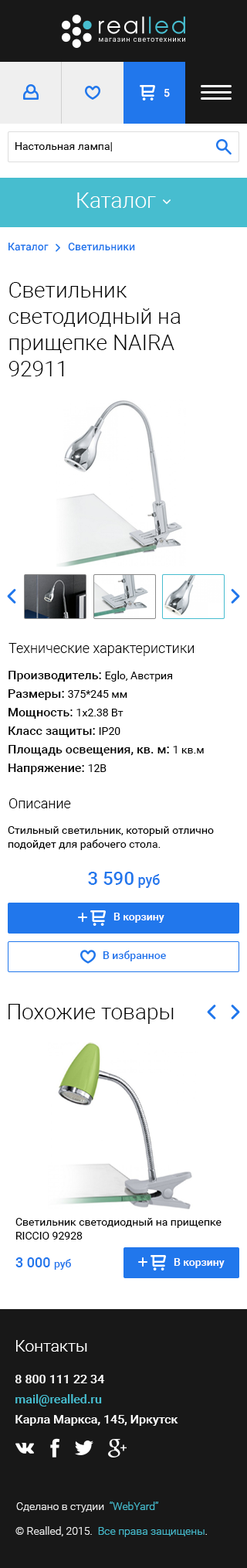
<style>
.page{position:relative;width:247px;height:1568px;background:#ffffff}
.page>*{position:absolute;margin:0}
.t1{font:10.8px "Roboto-Medium";color:#ffffff}
.t2{font:10.8px "Roboto-Regular";color:#000000}
.t3{font:21.6px "Roboto-Light";color:#ffffff}
.t4{font:10.8px "Roboto-Medium";color:#2177ec}
.t5{font:21.6px/26.3px "Roboto-Light";color:#000000}
.t6{font:13.9px "Roboto-Light";color:#000000}
.t7{font:12.4px/18.5px "Roboto-Medium";color:#000000}
.t8{font:10.8px/18.5px "Roboto-Regular";color:#000000}
.t9{font:10.8px/13.9px "Roboto-Regular";color:#000000}
.t10{font:18.6px "Roboto-Medium";color:#2177ec}
.t11{font:14px "Roboto-Medium";color:#2177ec}
.t12{font:21.6px "Roboto-Light";color:#000000}
.t13{font:10.8px/13.9px "Roboto-Regular";color:#010101}
.t14{font:13.9px "Roboto-Medium";color:#2177ec}
.t15{font:16.2px "Roboto-Light";color:#ffffff}
.t16{font:12.4px/20.1px "Roboto-Medium";color:#ffffff}
.t17{font:12.4px/20.1px "Roboto-Medium";color:#47bdcf}
.t18{font:10.8px "Roboto-Light";color:#efefef}
.t19{font:10.8px "Roboto-Light";color:#47bdcf}
</style>
<div class="page">
<p class="t1" style="left:165px;top:89px;width:5px;height:8px">5</p>
<p class="t2" style="left:15px;top:142px;width:97px;height:9px">Настольная лампа|</p>
<p class="t3" style="left:77px;top:192px;width:79px;height:16px">Каталог</p>
<p class="t4" style="left:9px;top:243px;width:40px;height:8px">Каталог</p>
<p class="t4" style="left:68px;top:243px;width:67px;height:8px">Светильники</p>
<p class="t5" style="left:9px;top:282px;width:172px;height:94px">Светильник светодиодный на прищепке NAIRA 92911</p>
<p class="t6" style="left:9px;top:643px;width:185px;height:13px">Технические характеристики</p>
<p class="t7" style="left:9px;top:671px;width:195px;height:103px">Производитель: <span class="t8">Eglo, Австрия<br></span>Размеры: <span class="t8">375*245 мм<br></span>Мощность: <span class="t8">1x2.38 Вт<br></span>Класс защиты: <span class="t8">IP20<br></span>Площадь освещения, кв. м: <span class="t8">1 кв.м<br></span>Напряжение: <span class="t8">12В</span></p>
<p class="t6" style="left:9px;top:798px;width:62px;height:10px">Описание</p>
<p class="t9" style="left:8px;top:826px;width:206px;height:24px">Стильный светильник, который отлично подойдет для рабочего стола.</p>
<p class="t10" style="left:88px;top:872px;width:72px;height:16px">3 590<span class="t11"> руб</span></p>
<p class="t1" style="left:114px;top:913px;width:51px;height:10px">В корзину</p>
<p class="t4" style="left:103px;top:951px;width:63px;height:10px">В избранное</p>
<p class="t12" style="left:9px;top:1004px;width:165px;height:20px">Похожие товары</p>
<p class="t13" style="left:15px;top:1218px;width:207px;height:22px">Светильник светодиодный на прищепке RICCIO 92928</p>
<p class="t14" style="left:15px;top:1257px;width:56px;height:13px">3 000 <span class="t4">руб</span></p>
<p class="t1" style="left:174px;top:1258px;width:51px;height:10px">В корзину</p>
<p class="t15" style="left:16px;top:1340px;width:71px;height:12px">Контакты</p>
<p class="t16" style="left:15px;top:1375px;width:164px;height:51px">8 800 111 22 34 <br><span class="t17">mail@realled.ru<br></span>Карла Маркса, 145, Иркутск</p>
<p class="t18" style="left:16px;top:1502px;width:142px;height:10px">Сделано в студии  <span class="t19">“WebYard”</span></p>
<p class="t19" style="left:15px;top:1526px;width:192px;height:11px"><span class="t18">© Realled, 2015.  </span>Все права защищены<span class="t18">.</span></p>
</div>
